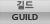
<style>
.page{position:relative;width:50px;height:24px}
.page>*{position:absolute;margin:0}
.t1{font:9px "NanumGothicExtraBold";color:#5c5c5c}
.t2{font:9px "NanumGothicExtraBold";color:#353535}
</style>
<div class="page">
<p class="t1" style="left:17px;top:0px;width:17px;height:10px">길드</p>
<p class="t2" style="left:12px;top:14px;width:26px;height:6px">GUILD</p>
</div>
